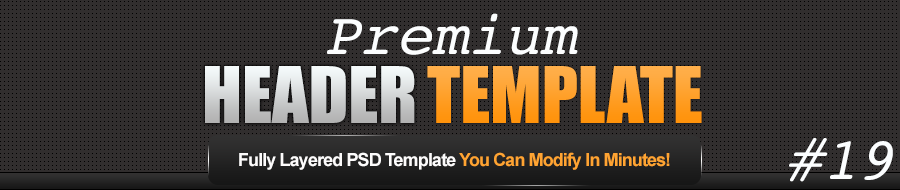
<style>
.page{position:relative;width:900px;height:190px;background:#312e2e}
.page>*{position:absolute;margin:0}
.t1{font:60px "Courier-Oblique";color:#fcfeff}
.t2{font:72px "Impact";text-transform:uppercase}
.t3{font:18px "Arial-BoldMT";letter-spacing:-0.05em;color:#fdfcfc}
.t4{font:18px "Arial-BoldMT";letter-spacing:-0.05em;color:#ffa432}
</style>
<div class="page">
<p class="t1" style="left:327px;top:13px;width:251px;height:42px">Premium</p>
<p class="t2" style="left:205px;top:66px;width:210px;height:57px">Header</p>
<p class="t2" style="left:427px;top:66px;width:275px;height:57px">Template</p>
<p class="t1" style="left:789px;top:138px;width:104px;height:44px">#19</p>
<p class="t3" style="left:239px;top:152px;width:431px;height:18px">Fully Layered PSD Template <span class="t4">You Can Modify In Minutes!</span></p>
</div>
